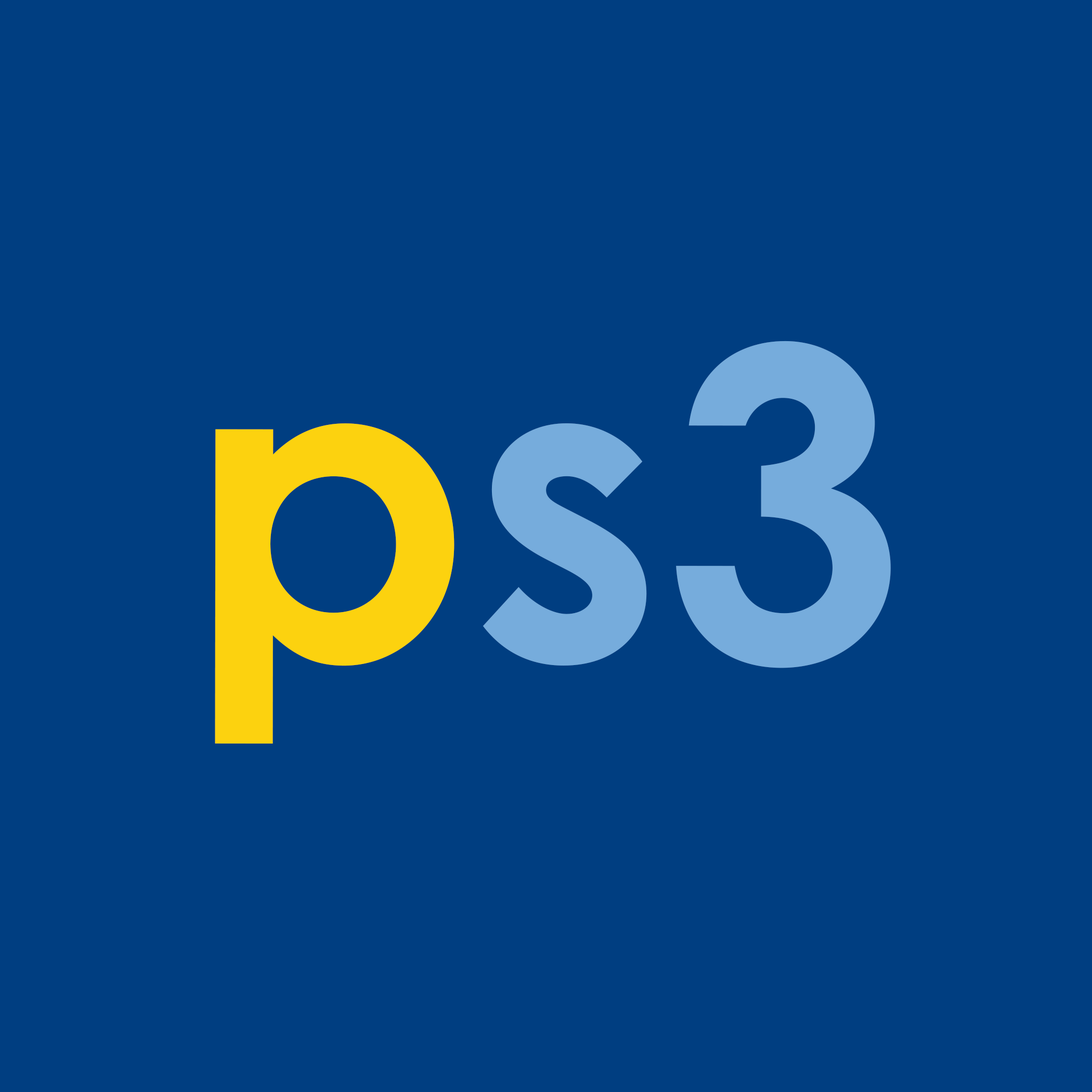
<style>
.page{position:relative;width:1092px;height:1092px;background:#003e81}
.page>*{position:absolute;margin:0}
.t1{font:433.3px "CenturyGothicPro-Bold";color:#76acdc}
.t2{font:433.3px "CenturyGothicPro-Bold";color:#fcd20f}
</style>
<div class="page">
<p class="t1" style="left:215px;top:341px;width:676px;height:403px"><span class="t2">p</span>s3</p>
</div>
